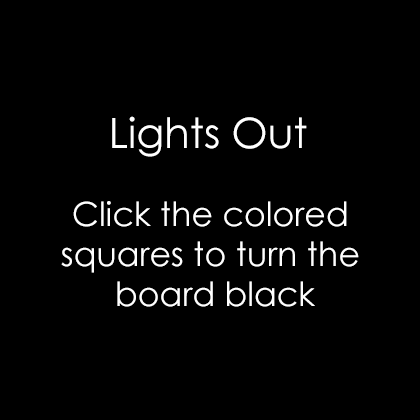
<style>
.page{position:relative;width:420px;height:420px;background:#000000}
.page>*{position:absolute;margin:0}
.t1{font:41.7px "CenturyGothic";color:#ffffff}
.t2{font:33.3px "CenturyGothic";color:#ffffff}
</style>
<div class="page">
<p class="t1" style="left:112px;top:117px;width:195px;height:41px">Lights Out</p>
<p class="t1" style="left:112px;top:117px;width:195px;height:41px">Lights Out</p>
<p class="t1" style="left:112px;top:117px;width:195px;height:41px">Lights Out</p>
<p class="t1" style="left:112px;top:116px;width:195px;height:41px">Lights Out</p>
<p class="t2" style="left:61px;top:201px;width:298px;height:106px;text-align:center">Click the colored <br>squares to turn the <br>board black</p>
</div>
